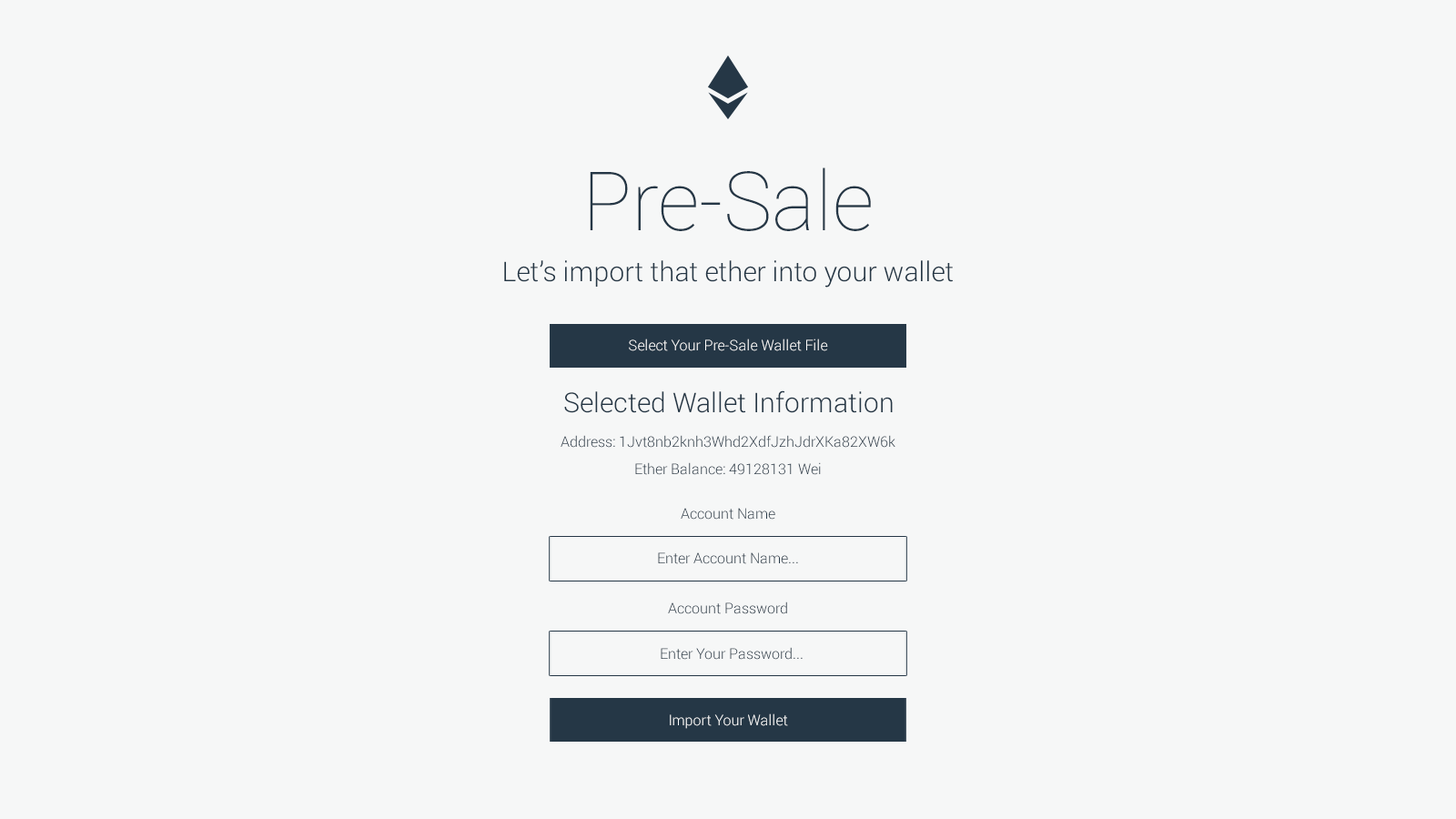
<style>
.page{position:relative;width:1456px;height:819px;background:#f6f7f7}
.page>*{position:absolute;margin:0}
.t1{font:81.9px "Roboto-Thin";color:#253746}
.t2{font:27.3px "Roboto-Light";color:#253746}
.t3{font:14.6px "Roboto-Light";color:#ffffff}
.t4{font:14.6px/27.3px "Roboto-Light";color:#253746}
.t5{font:14.6px "Roboto-Light";color:#253746}
</style>
<div class="page">
<p class="t1" style="left:590px;top:167px;width:281px;height:64px">Pre-Sale</p>
<p class="t2" style="left:504px;top:260px;width:449px;height:28px">Let’s import that ether into your wallet</p>
<p class="t3" style="left:629px;top:339px;width:199px;height:12px">Select Your Pre-Sale Wallet File</p>
<p class="t2" style="left:564px;top:390px;width:329px;height:23px">Selected Wallet Information</p>
<p class="t4" style="left:561px;top:435px;width:334px;height:40px;text-align:center">Address: 1Jvt8nb2knh3Whd2XdfJzhJdrXKa82XW6k<br>Ether Balance: 49128131 Wei</p>
<p class="t5" style="left:681px;top:508px;width:94px;height:12px">Account Name</p>
<p class="t5" style="left:658px;top:552px;width:140px;height:12px">Enter Account Name...</p>
<p class="t5" style="left:668px;top:602px;width:119px;height:12px">Account Password</p>
<p class="t5" style="left:661px;top:647px;width:142px;height:13px">Enter Your Password...</p>
<p class="t3" style="left:670px;top:713px;width:118px;height:16px">Import Your Wallet</p>
</div>
